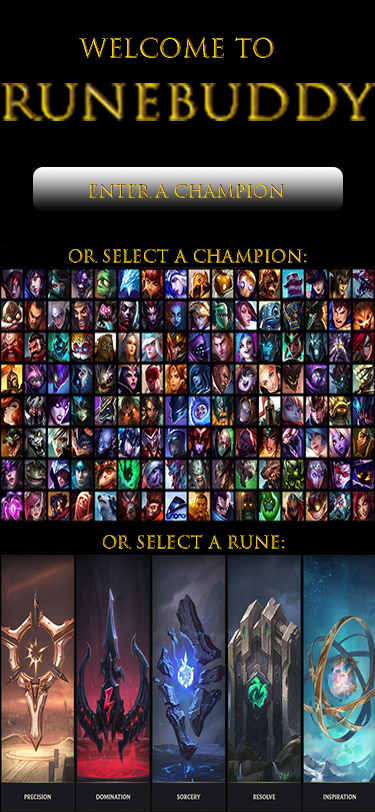
<style>
.page{position:relative;width:375px;height:812px;background:#000000}
.page>*{position:absolute;margin:0}
.t1{font:25px "TrajanColor-Concept";font-weight:bold}
.t2{font:16.7px "TrajanColor-Concept";font-weight:bold}
</style>
<div class="page">
<p class="t1" style="left:79px;top:37px;width:195px;height:21px">Welcome to</p>
<p class="t2" style="left:89px;top:184px;width:195px;height:14px">Enter A Champion</p>
<p class="t2" style="left:69px;top:249px;width:238px;height:14px">or Select a champion:</p>
<p class="t2" style="left:103px;top:535px;width:182px;height:14px">Or select a rune:</p>
</div>
